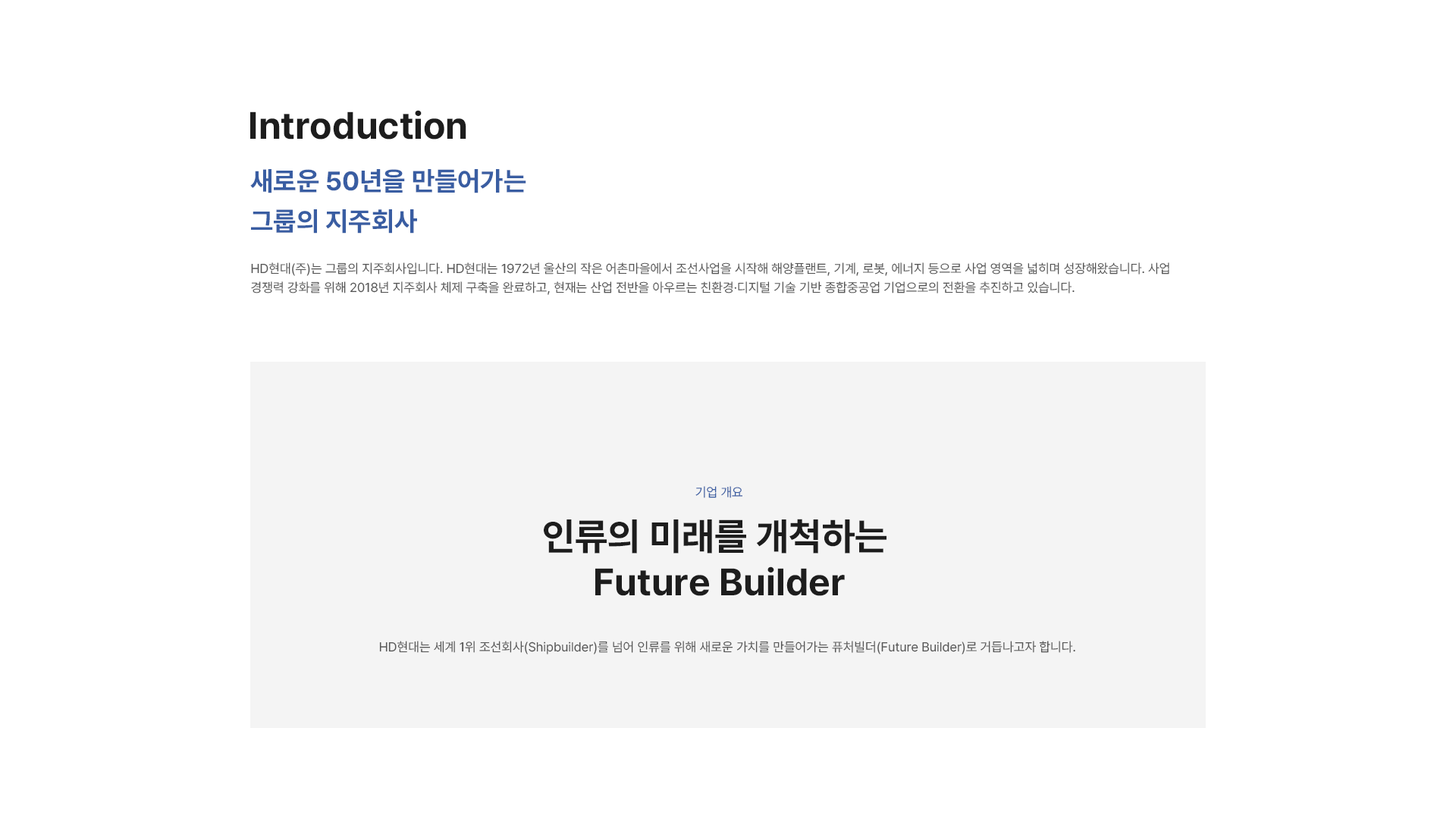
<style>
.page{position:relative;width:1456px;height:819px;background:#ffffff}
.page>*{position:absolute;margin:0}
.t1{font:37.9px "PretendardVariable-Bold";color:#1d1d1d}
.t2{font:26.5px/39.8px "PretendardVariable-Bold";color:#395da2}
.t3{font:12.9px/19.3px "PretendardVariable-Regular";color:#555555}
.t4{font:12.9px "PretendardVariable-Regular";color:#395da2}
.t5{font:37.9px/45.5px "PretendardVariable-Bold";color:#1d1d1d}
.t6{font:12.9px "PretendardVariable-Regular";color:#555555}
</style>
<div class="page">
<p class="t1" style="left:250px;top:110px;width:216px;height:30px">Introduction</p>
<p class="t2" style="left:250px;top:169px;width:276px;height:65px">새로운 50년을 만들어가는<br>그룹의 지주회사</p>
<p class="t3" style="left:251px;top:262px;width:918px;height:33px">HD현대(주)는 그룹의 지주회사입니다. HD현대는 1972년 울산의 작은 어촌마을에서 조선사업을 시작해 해양플랜트, 기계, 로봇, 에너지 등으로 사업 영역을 넓히며 성장해왔습니다. 사업 경쟁력 강화를 위해 2018년 지주회사 체제 구축을 완료하고, 현재는 산업 전반을 아우르는 친환경·디지털 기술 기반 종합중공업 기업으로의 전환을 추진하고 있습니다.</p>
<p class="t4" style="left:695px;top:486px;width:47px;height:12px">기업 개요</p>
<p class="t5" style="left:544px;top:519px;width:342px;height:77px;text-align:center">인류의 미래를 개척하는 <br>Future Builder</p>
<p class="t6" style="left:379px;top:641px;width:696px;height:13px">HD현대는 세계 1위 조선회사(Shipbuilder)를 넘어 인류를 위해 새로운 가치를 만들어가는 퓨처빌더(Future Builder)로 거듭나고자 합니다.</p>
</div>
